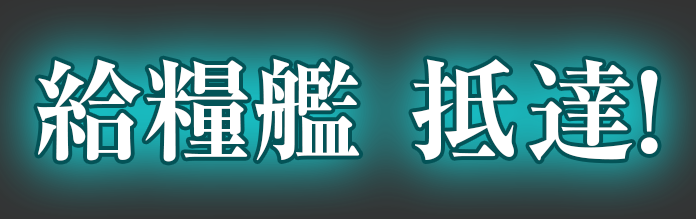
<style>
.page{position:relative;width:696px;height:219px}
.page>*{position:absolute;margin:0}
.t1{font:110px "RyuminPr6N-ExBold";letter-spacing:0.05em;color:#ffffff}
.t2{font:110px "RyuminPr6N-ExBold";color:#ffffff}
</style>
<div class="page">
<p class="t1" style="left:37px;top:58px;width:621px;height:104px"><span class="t2">給糧</span>艦 抵<span class="t2">達!</span></p>
</div>
